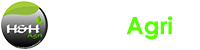
<style>
.page{position:relative;width:200px;height:50px;background:#ffffff}
.page>*{position:absolute;margin:0}
.t1{font:24px "CenturyGothic-Bold";color:#54ff00}
.t2{font:24px "CenturyGothic-Bold";color:#ffffff}
</style>
<div class="page">
<p class="t1" style="left:72px;top:16px;width:101px;height:24px"><span class="t2">H&amp;H </span>Agri</p>
</div>
